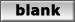
<style>
.page{position:relative;width:75px;height:22px}
.page>*{position:absolute;margin:0}
.t1{font:14px "Verdana-Bold";color:#000000;font-weight:bold}
</style>
<div class="page">
<p class="t1" style="left:16px;top:4px;width:45px;height:12px">blank</p>
</div>
